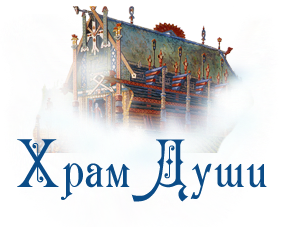
<style>
.page{position:relative;width:284px;height:227px;background:#ffffff}
.page>*{position:absolute;margin:0}
.t1{font:50px "Karmen";color:#0b4c87}
</style>
<div class="page">
<p class="t1" style="left:17px;top:139px;width:250px;height:63px">Храм Души</p>
</div>
